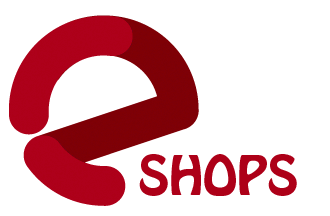
<style>
.page{position:relative;width:330px;height:216px;background:#ffffff}
.page>*{position:absolute;margin:0}
.t1{font:48px "HoboStd";color:#ad0018}
</style>
<div class="page">
<p class="t1" style="left:139px;top:154px;width:158px;height:42px">SHOPS</p>
</div>
